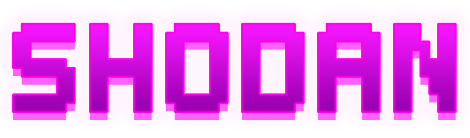
<style>
.page{position:relative;width:470px;height:138px;background:#fef5ff}
.page>*{position:absolute;margin:0}
.t1{font:141px "Super-Smash-TV";letter-spacing:0.04em}
</style>
<div class="page">
<p class="t1" style="left:13px;top:23px;width:443px;height:89px">Shodan</p>
</div>
